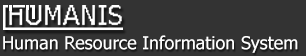
<style>
.page{position:relative;width:306px;height:56px;background:#333333}
.page>*{position:absolute;margin:0}
.t1{font:18px "Tahoma";color:#ffffff}
</style>
<div class="page">
<p class="t1" style="left:3px;top:35px;width:295px;height:18px">Human Resource Information System</p>
</div>
